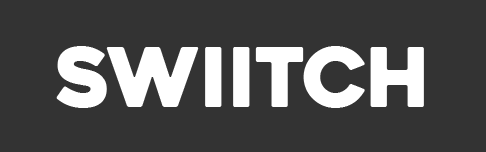
<style>
.page{position:relative;width:486px;height:152px;background:#333333}
.page>*{position:absolute;margin:0}
.t1{font:82.2px "Heavitas";color:#ffffff}
</style>
<div class="page">
<p class="t1" style="left:56px;top:46px;width:368px;height:62px">SWIITCH</p>
</div>
